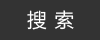
<style>
.page{position:relative;width:100px;height:40px;background:#333333}
.page>*{position:absolute;margin:0}
.t1{font:20px "FZLTHK--GBK1-0";letter-spacing:0.04em;color:#ffffff}
</style>
<div class="page">
<p class="t1" style="left:27px;top:10px;width:47px;height:20px">搜 索</p>
</div>
